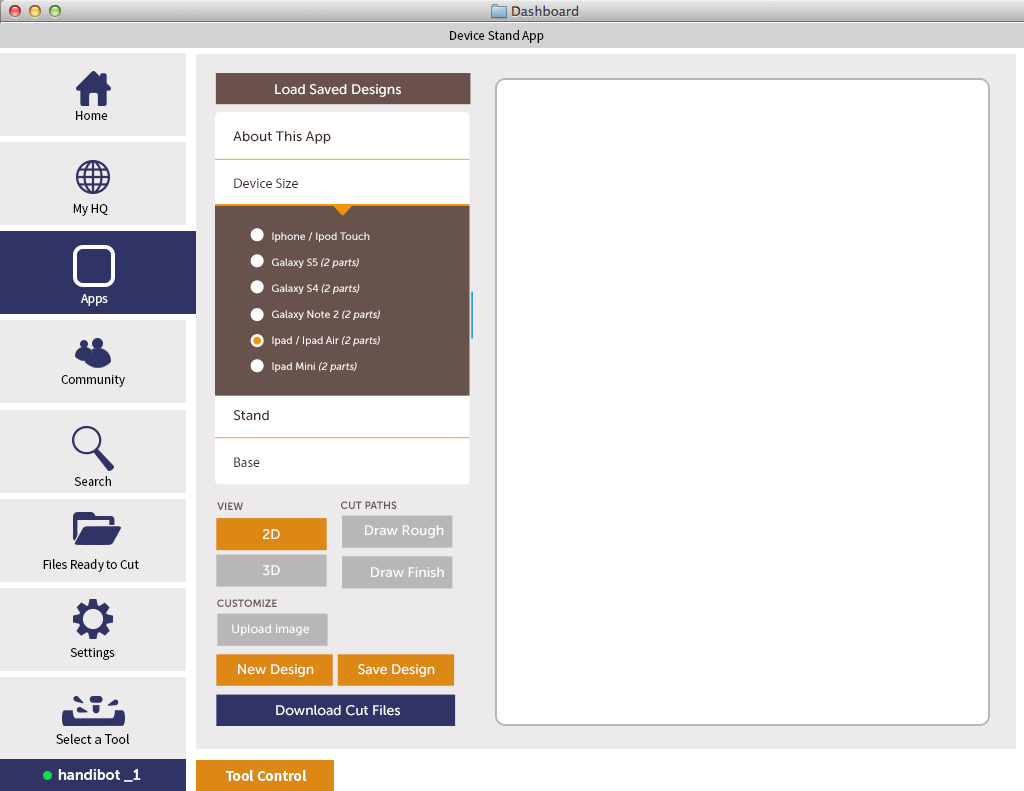
<style>
.page{position:relative;width:1024px;height:791px;background:#ffffff}
.page>*{position:absolute;margin:0}
.t1{font:13px "SourceSansPro-Regular";color:#000000}
.t2{font:13.9px "MuseoSans-500";color:#ffffff}
.t3{font:13.9px/46.8px "MuseoSans-500";color:#442e27}
.t4{font:13.9px/46.8px "MyriadPro-Regular";color:#442e27}
.t5{font:10.4px/26px "MuseoSans-500";color:#ffffff}
.t6{font:10.4px/26px "MuseoSans-500Italic";color:#ffffff}
.t7{font:13px "SourceSansPro-Regular";color:#ffffff}
.t8{font:10.4px "MuseoSans-700";color:#67524c;text-transform:uppercase}
.t9{font:12.1px "MuseoSans-500";color:#ffffff}
.t10{font:14px "SourceSansPro-Regular";color:#000000}
.t11{font:15px "MuseoSans-700";letter-spacing:-0.01em;color:#ffffff}
.t12{font:15px "SourceSansPro-Bold";color:#ffffff}
</style>
<div class="page">
<p class="t1" style="left:450px;top:30px;width:94px;height:13px">Device Stand App</p>
<p class="t2" style="left:275px;top:84px;width:126px;height:13px">Load Saved Designs</p>
<p class="t1" style="left:76px;top:111px;width:32px;height:9px">Home</p>
<p class="t3" style="left:233px;top:131px;width:98px;height:57px">About This App<br><span class="t4">Device Size</span></p>
<p class="t1" style="left:73px;top:204px;width:35px;height:12px">My HQ</p>
<p class="t5" style="left:272px;top:232px;width:108px;height:140px">Iphone / Ipod Touch<br>Galaxy S5 <span class="t6">(2 parts)<br></span>Galaxy S4 <span class="t6">(2 parts)<br></span>Galaxy Note 2 <span class="t6">(2 parts)<br></span>Ipad / Ipad Air <span class="t6">(2 parts)<br></span>Ipad Mini <span class="t6">(2 parts)</span></p>
<p class="t7" style="left:81px;top:294px;width:27px;height:12px">Apps</p>
<p class="t1" style="left:61px;top:375px;width:64px;height:12px">Community</p>
<p class="t3" style="left:233px;top:410px;width:36px;height:57px">Stand<br><span class="t4">Base</span></p>
<p class="t1" style="left:74px;top:476px;width:37px;height:10px">Search</p>
<p class="t8" style="left:217px;top:502px;width:26px;height:8px">View</p>
<p class="t8" style="left:341px;top:501px;width:56px;height:8px">Cut Paths</p>
<p class="t2" style="left:263px;top:529px;width:17px;height:10px">2D</p>
<p class="t2" style="left:365px;top:525px;width:79px;height:13px">Draw Rough</p>
<p class="t1" style="left:43px;top:559px;width:96px;height:13px">Files Ready to Cut</p>
<p class="t2" style="left:263px;top:565px;width:17px;height:11px">3D</p>
<p class="t2" style="left:371px;top:567px;width:73px;height:11px">Draw Finish</p>
<p class="t8" style="left:217px;top:599px;width:60px;height:8px">Customize</p>
<p class="t9" style="left:232px;top:624px;width:77px;height:12px">Upload image</p>
<p class="t1" style="left:70px;top:648px;width:45px;height:12px">Settings</p>
<p class="t2" style="left:238px;top:664px;width:76px;height:13px">New Design</p>
<p class="t2" style="left:358px;top:664px;width:77px;height:13px">Save Design</p>
<p class="t2" style="left:276px;top:705px;width:124px;height:11px">Download Cut Files</p>
<p class="t10" style="left:56px;top:734px;width:73px;height:10px">Select a Tool</p>
<p class="t11" style="left:58px;top:769px;width:83px;height:13px">handibot _1</p>
<p class="t12" style="left:226px;top:770px;width:81px;height:11px">Tool Control</p>
</div>
